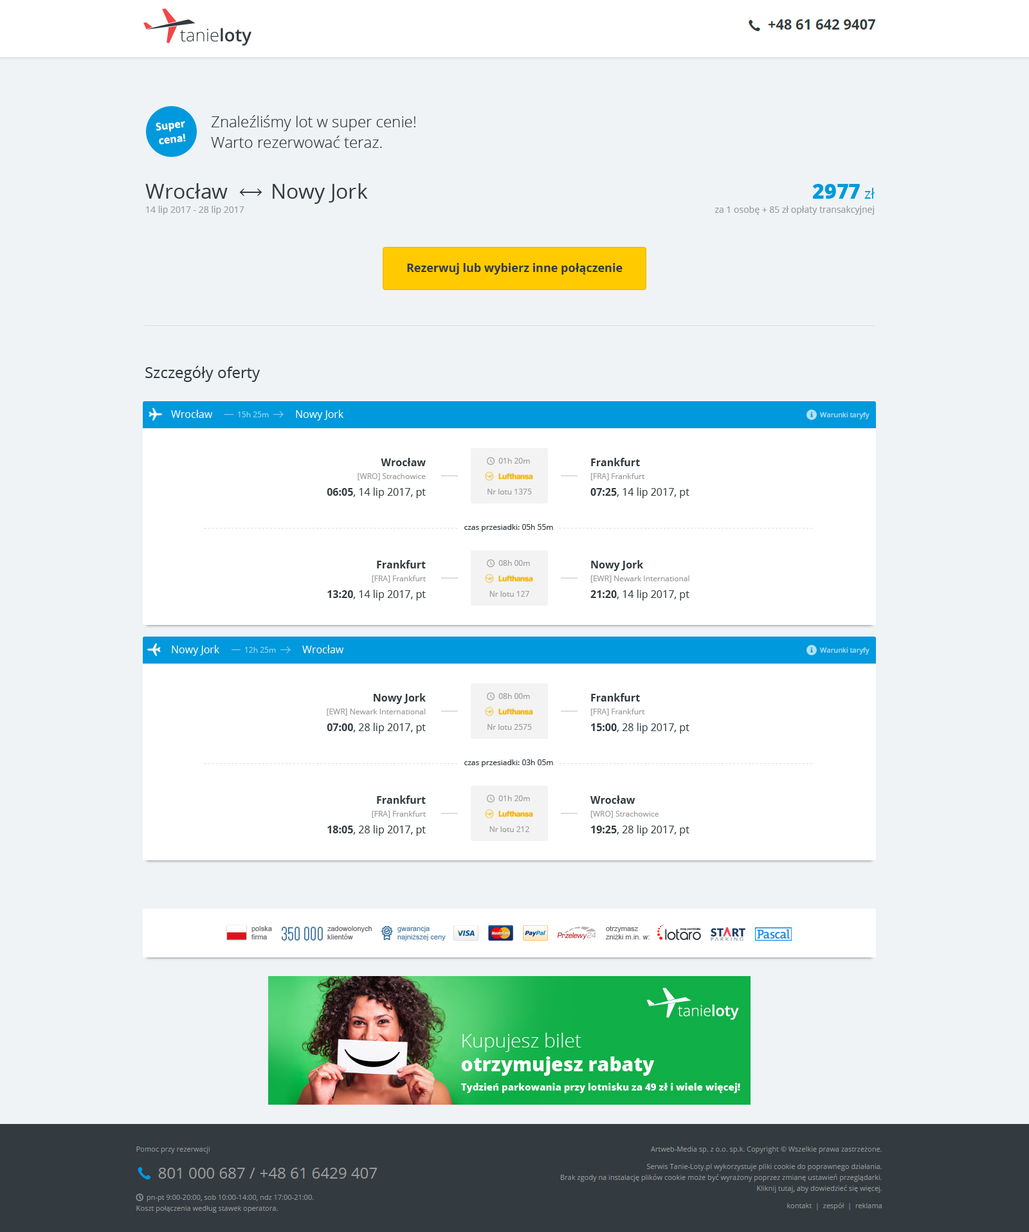
<style>
.page{position:relative;width:1029px;height:1232px;background:#eff3f5}
.page>*{position:absolute;margin:0}
.t1{font:10.3px/14.1px "OpenSans-Bold";color:#ffffff}
.t2{font:15.4px/20.6px "OpenSans-Light";color:#333b40}
.t3{font:20.6px "OpenSans";color:#333b40}
.t4{font:9px/14.1px "OpenSans";color:#9c9c9c}
.t5{font:20.6px/14.1px "OpenSans-Extrabold";color:#0099dd}
.t6{font:14.1px/14.1px "OpenSans";color:#0099dd}
.t7{font:9px "OpenSans";color:#9c9c9c}
.t8{font:11.6px "OpenSans-Bold";color:#333b40}
.t9{font:15.4px "OpenSans";color:#333b40}
.t10{font:10.3px "OpenSans";color:#ffffff}
.t11{font:7.7px "OpenSans";color:#99d6f1}
.t12{font:7.7px/12.9px "OpenSans";color:#9c9c9c}
.t13{font:10.3px/12.9px "OpenSans-Bold";color:#333b40}
.t14{font:10.3px/16.7px "OpenSans-Bold";color:#333b40}
.t15{font:10.3px/16.7px "OpenSans";color:#333b40}
.t16{font:7.7px/30.9px "OpenSans";color:#9c9c9c}
.t17{font:7.7px "OpenSans";color:#333b40}
</style>
<div class="page">
<p class="t1" style="left:156px;top:121px;width:30px;height:24px;text-align:center;rotate:-7deg">Super<br>cena!</p>
<p class="t2" style="left:211px;top:115px;width:204px;height:33px">Znaleźliśmy lot w super cenie! <br>Warto rezerwować teraz.</p>
<p class="t3" style="left:145px;top:183px;width:223px;height:21px">Wrocław        Nowy Jork</p>
<p class="t4" style="left:714px;top:184px;width:160px;height:31px;text-align:right"><span class="t5">2977</span><span class="t6"> zł<br></span>za 1 osobę + 85 zł opłaty transakcyjnej</p>
<p class="t7" style="left:146px;top:206px;width:98px;height:9px">14 lip 2017 - 28 lip 2017</p>
<p class="t8" style="left:407px;top:263px;width:215px;height:11px">Rezerwuj lub wybierz inne połączenie</p>
<p class="t9" style="left:145px;top:366px;width:115px;height:16px">Szczegóły oferty</p>
<p class="t10" style="left:171px;top:410px;width:172px;height:10px">Wrocław                               Nowy Jork</p>
<p class="t11" style="left:238px;top:411px;width:31px;height:6px">15h 25m</p>
<p class="t12" style="left:327px;top:458px;width:99px;height:40px;text-align:right"><span class="t13">Wrocław<br></span>[WRO] Strachowice<br><span class="t14">06:05</span><span class="t15">, 14 lip 2017, pt</span></p>
<p class="t16" style="left:487px;top:458px;width:45px;height:36px;text-align:center">01h 20m<br>Nr lotu 1375</p>
<p class="t15" style="left:590px;top:458px;width:99px;height:40px"><span class="t13">Frankfurt<br></span><span class="t12">[FRA] Frankfurt<br></span><span class="t14">07:25</span>, 14 lip 2017, pt</p>
<p class="t17" style="left:464px;top:524px;width:89px;height:8px">czas przesiadki: 05h 55m</p>
<p class="t15" style="left:327px;top:560px;width:99px;height:40px;text-align:right"><span class="t13">Frankfurt<br></span><span class="t12">[FRA] Frankfurt<br></span><span class="t14">13:20</span>, 14 lip 2017, pt</p>
<p class="t16" style="left:489px;top:560px;width:41px;height:37px;text-align:center">08h 00m<br>Nr lotu 127</p>
<p class="t12" style="left:590px;top:560px;width:99px;height:40px"><span class="t13">Nowy Jork<br></span>[EWR] Newark International<br><span class="t14">21:20</span><span class="t15">, 14 lip 2017, pt</span></p>
<p class="t10" style="left:172px;top:645px;width:171px;height:11px">Nowy Jork                               Wrocław</p>
<p class="t11" style="left:245px;top:647px;width:31px;height:5px">12h 25m</p>
<p class="t12" style="left:327px;top:693px;width:99px;height:41px;text-align:right"><span class="t13">Nowy Jork<br></span>[EWR] Newark International<br><span class="t14">07:00</span><span class="t15">, 28 lip 2017, pt</span></p>
<p class="t16" style="left:487px;top:693px;width:45px;height:37px;text-align:center">08h 00m<br>Nr lotu 2575</p>
<p class="t15" style="left:590px;top:693px;width:99px;height:41px"><span class="t13">Frankfurt<br></span><span class="t12">[FRA] Frankfurt<br></span><span class="t14">15:00</span>, 28 lip 2017, pt</p>
<p class="t17" style="left:464px;top:759px;width:89px;height:8px">czas przesiadki: 03h 05m</p>
<p class="t15" style="left:327px;top:795px;width:99px;height:41px;text-align:right"><span class="t13">Frankfurt<br></span><span class="t12">[FRA] Frankfurt<br></span><span class="t14">18:05</span>, 28 lip 2017, pt</p>
<p class="t16" style="left:489px;top:795px;width:41px;height:37px;text-align:center">01h 20m<br>Nr lotu 212</p>
<p class="t12" style="left:590px;top:795px;width:99px;height:41px"><span class="t13">Wrocław<br></span>[WRO] Strachowice<br><span class="t14">19:25</span><span class="t15">, 28 lip 2017, pt</span></p>
</div>
